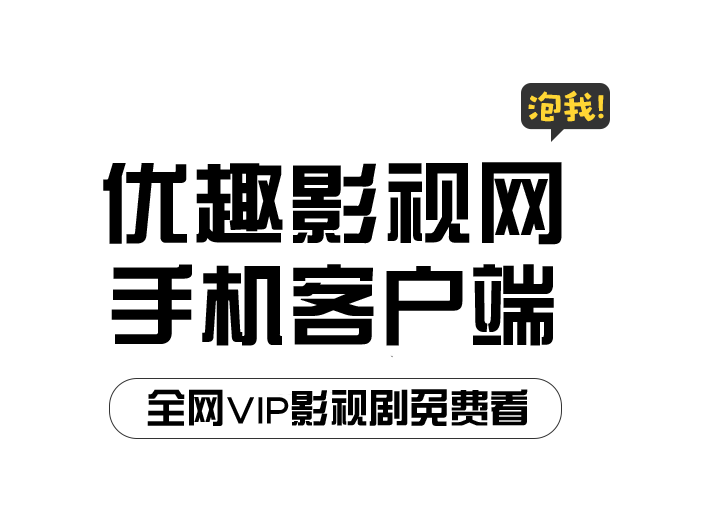
<style>
.page{position:relative;width:720px;height:522px;background:#ffffff}
.page>*{position:absolute;margin:0}
.t1{font:90px "BDZYJT--GB1-0";color:#000000;scale:1.05 1}
.t2{font:90px "BDZYJT--GB1-0";color:#000000}
.t3{font:40px "BDZYJT--GB1-0";color:#000000}
</style>
<div class="page">
<p class="t1" style="left:103px;top:162px;width:459px;height:83px">优趣影视网</p>
<p class="t2" style="left:111px;top:264px;width:443px;height:82px">手机客户端</p>
<p class="t3" style="left:147px;top:389px;width:381px;height:37px">全网VIP影视剧免费看</p>
</div>
